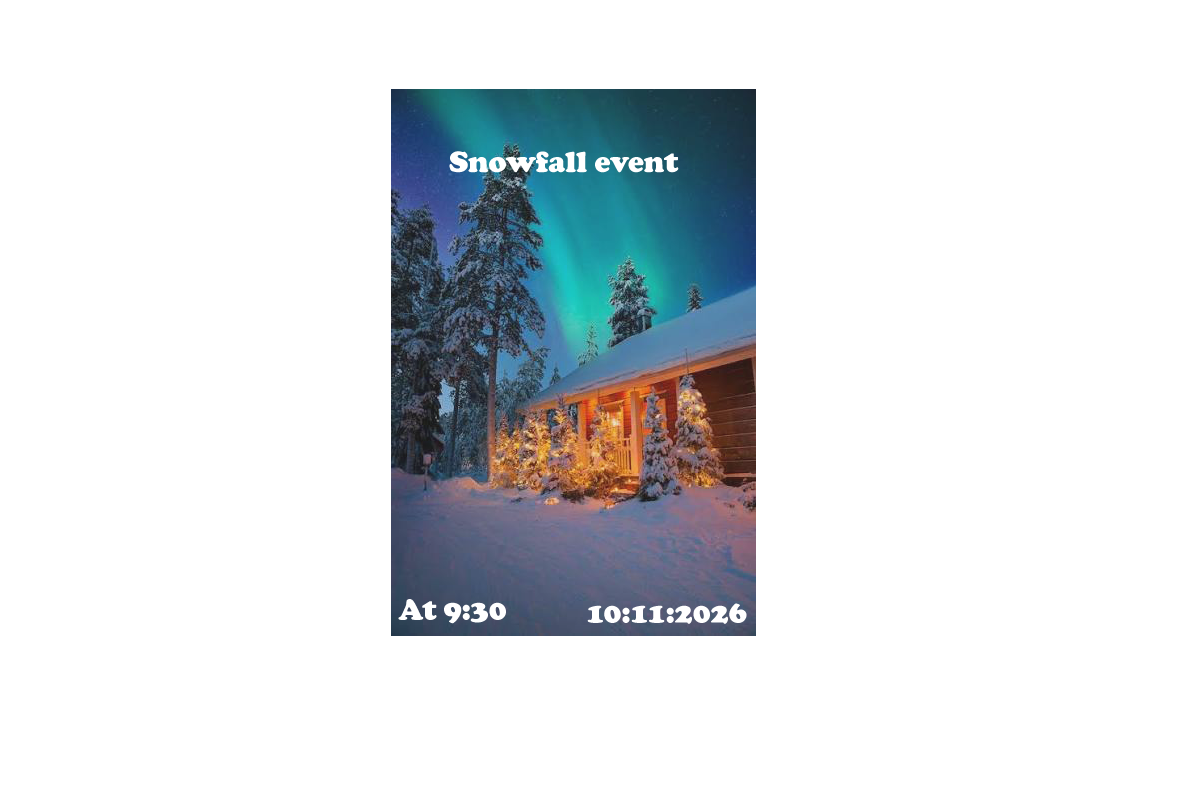
<style>
.page{position:relative;width:1200px;height:800px;background:#ffffff}
.page>*{position:absolute;margin:0}
.t1{font:30px "CooperBlack";color:#ffffff}
</style>
<div class="page">
<p class="t1" style="left:449px;top:151px;width:230px;height:22px">Snowfall event</p>
<p class="t1" style="left:398px;top:599px;width:108px;height:25px">At 9:30</p>
<p class="t1" style="left:587px;top:603px;width:160px;height:21px">10:11:2026</p>
</div>
